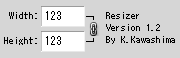
<style>
.page{position:relative;width:180px;height:58px;background:#d6d6d6}
.page>*{position:absolute;margin:0}
.t1{font:10px "MS-Gothic";color:#000000}
.t2{font:12px "MS-Gothic";color:#000000}
</style>
<div class="page">
<p class="t1" style="left:9px;top:12px;width:28px;height:7px">Width:</p>
<p class="t2" style="left:46px;top:11px;width:15px;height:9px">123</p>
<p class="t1" style="left:106px;top:12px;width:69px;height:32px">Resizer<br>Version 1.2<br>By K.Kawashima</p>
<p class="t1" style="left:4px;top:37px;width:33px;height:8px">Height:</p>
<p class="t2" style="left:46px;top:36px;width:15px;height:9px">123</p>
</div>
